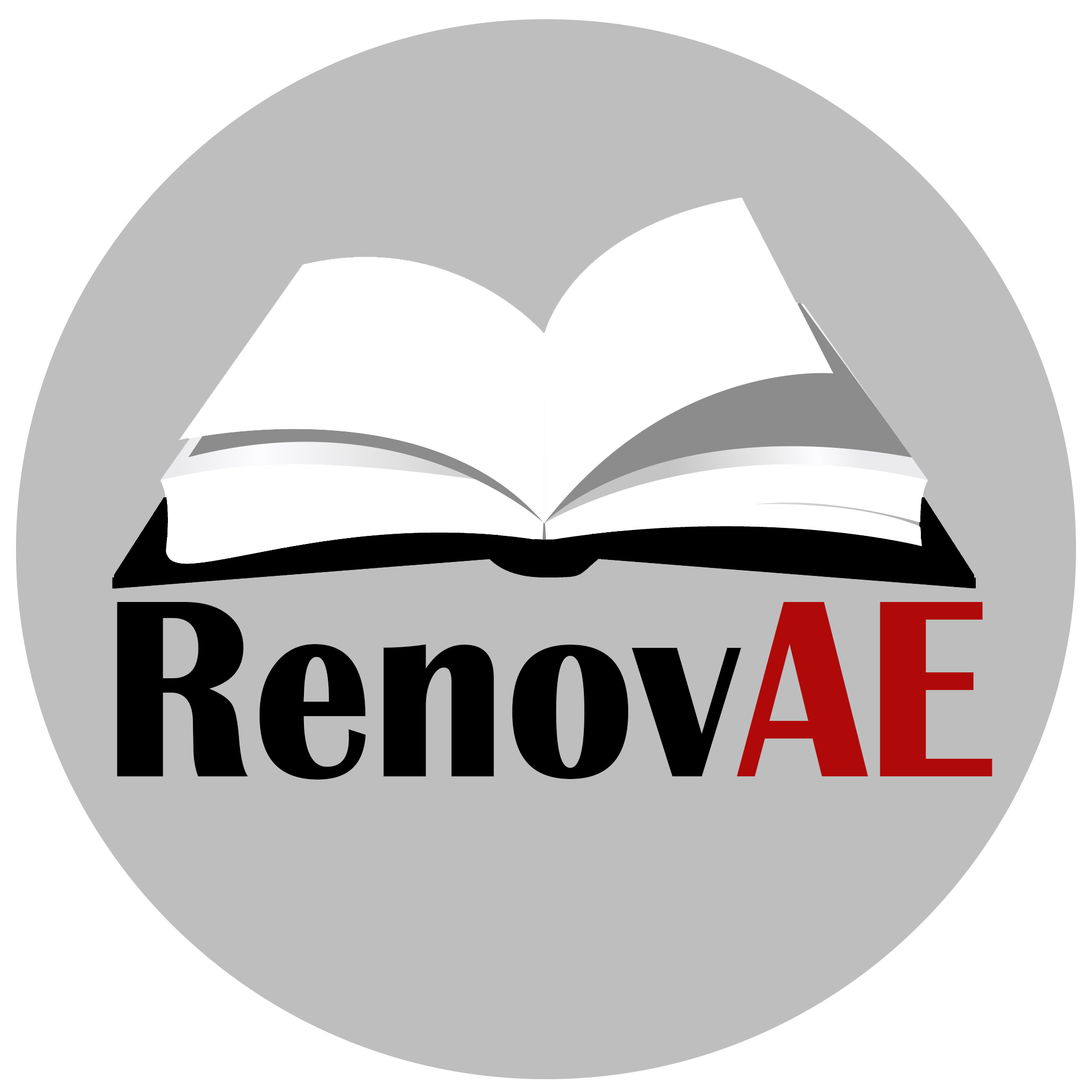
<style>
.page{position:relative;width:1092px;height:1092px;background:#bebebe}
.page>*{position:absolute;margin:0}
.t1{font:261px "BritannicBold";color:#b00909;scale:0.91 1}
.t2{font:261px "BritannicBold";color:#000000;scale:0.91 1}
</style>
<div class="page">
<p class="t1" style="left:117px;top:602px;width:875px;height:178px"><span class="t2">Renov</span>AE<br><br><br><br>by</p>
</div>
